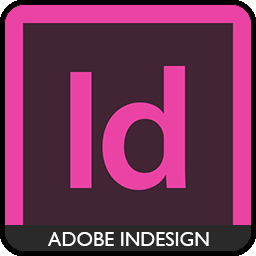
<style>
.page{position:relative;width:256px;height:256px;background:#412534}
.page>*{position:absolute;margin:0}
.t1{font:20px "GillSansMT";color:#ffffff}
</style>
<div class="page">
<p class="t1" style="left:48px;top:232px;width:161px;height:14px">ADOBE INDESIGN</p>
</div>
